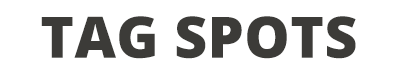
<style>
.page{position:relative;width:400px;height:74px;background:#ffffff}
.page>*{position:absolute;margin:0}
.t1{font:57.3px "OpenSans-ExtraBold";letter-spacing:0.01em;color:#3c3b38;text-transform:uppercase}
</style>
<div class="page">
<p class="t1" style="left:41px;top:16px;width:315px;height:43px">tag spots</p>
</div>
